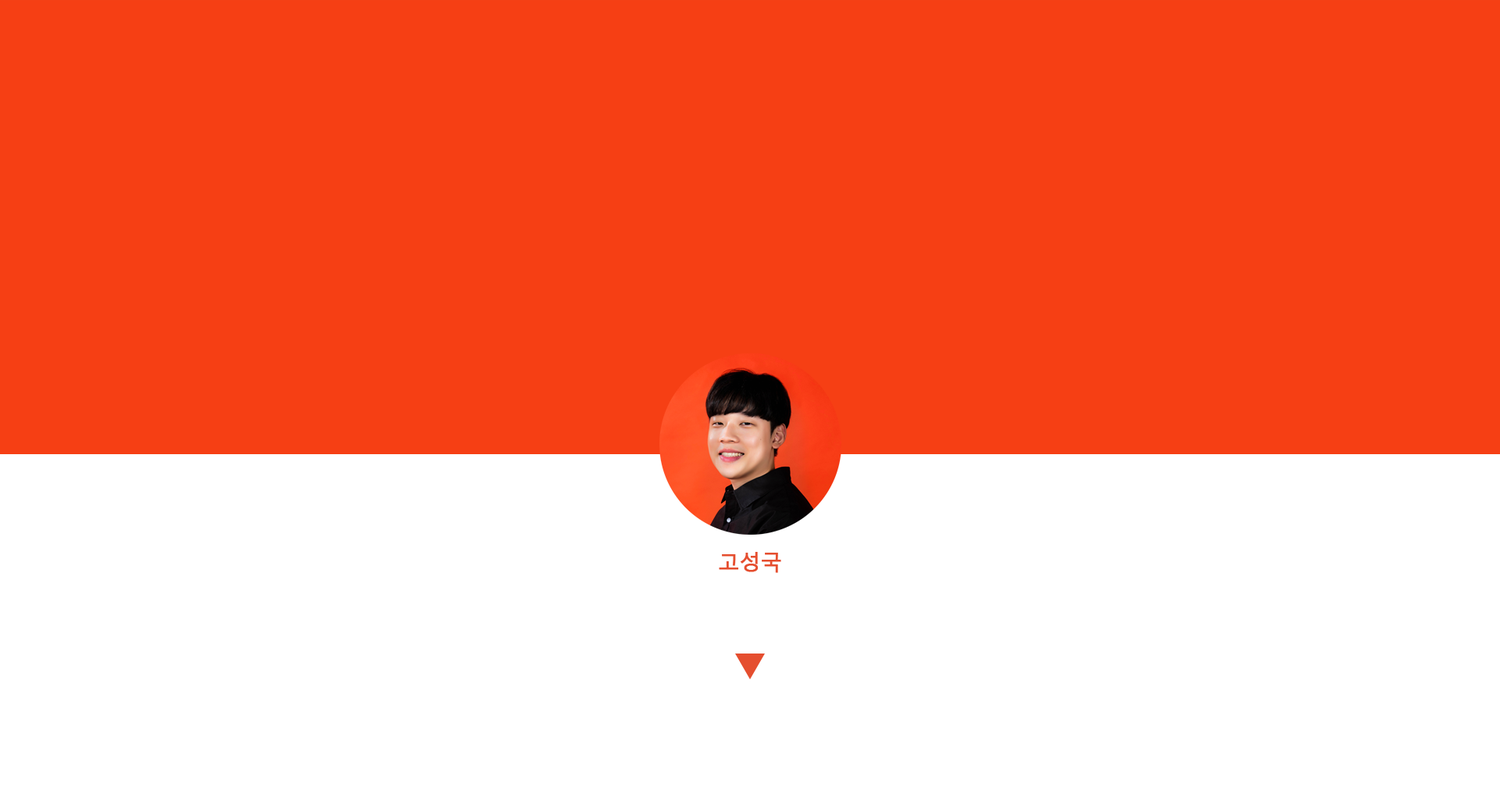
<style>
.page{position:relative;width:1500px;height:795px;background:#f63f14}
.page>*{position:absolute;margin:0}
.t1{font:20.8px "MalgunGothic";color:#e54e2f;font-weight:bold}
</style>
<div class="page">
<p class="t1" style="left:719px;top:552px;width:62px;height:21px">고성국</p>
</div>
